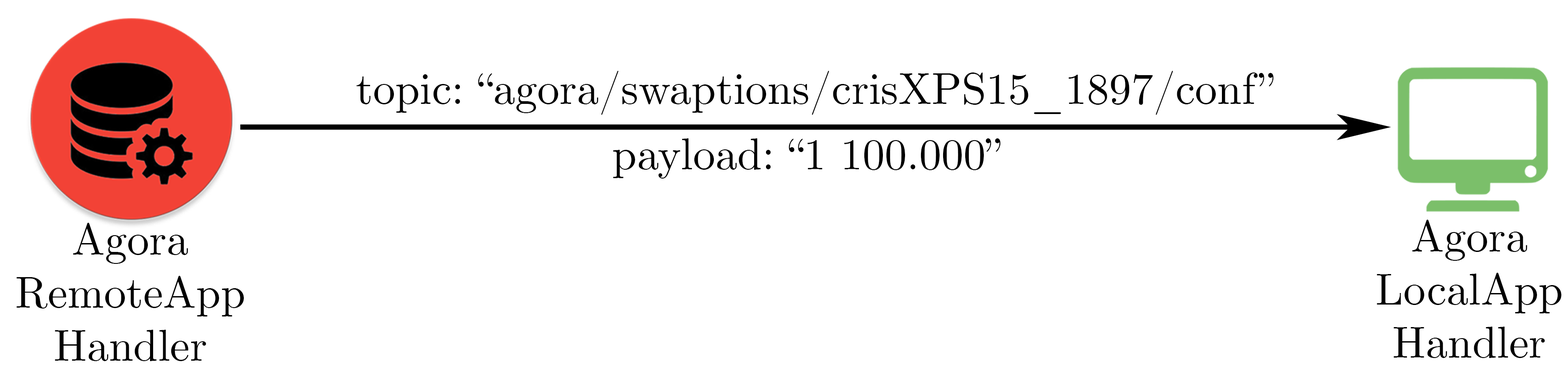
<style>
.page{position:relative;width:1568px;height:381px;background:#ffffff}
.page>*{position:absolute;margin:0}
.t1{font:44.3px "CMUSerif-Roman";color:#000000}
</style>
<div class="page">
<p class="t1" style="left:356px;top:71px;width:918px;height:44px">topic: “agora/swaptions/crisXPS15_1897/conf”</p>
<p class="t1" style="left:613px;top:139px;width:388px;height:40px">payload: “1 100.000”</p>
<p class="t1" style="left:1377px;top:220px;width:184px;height:138px;text-align:center">Agora<br>LocalApp<br>Handler</p>
<p class="t1" style="left:16px;top:223px;width:228px;height:139px;text-align:center">Agora<br>RemoteApp<br>Handler</p>
</div>
